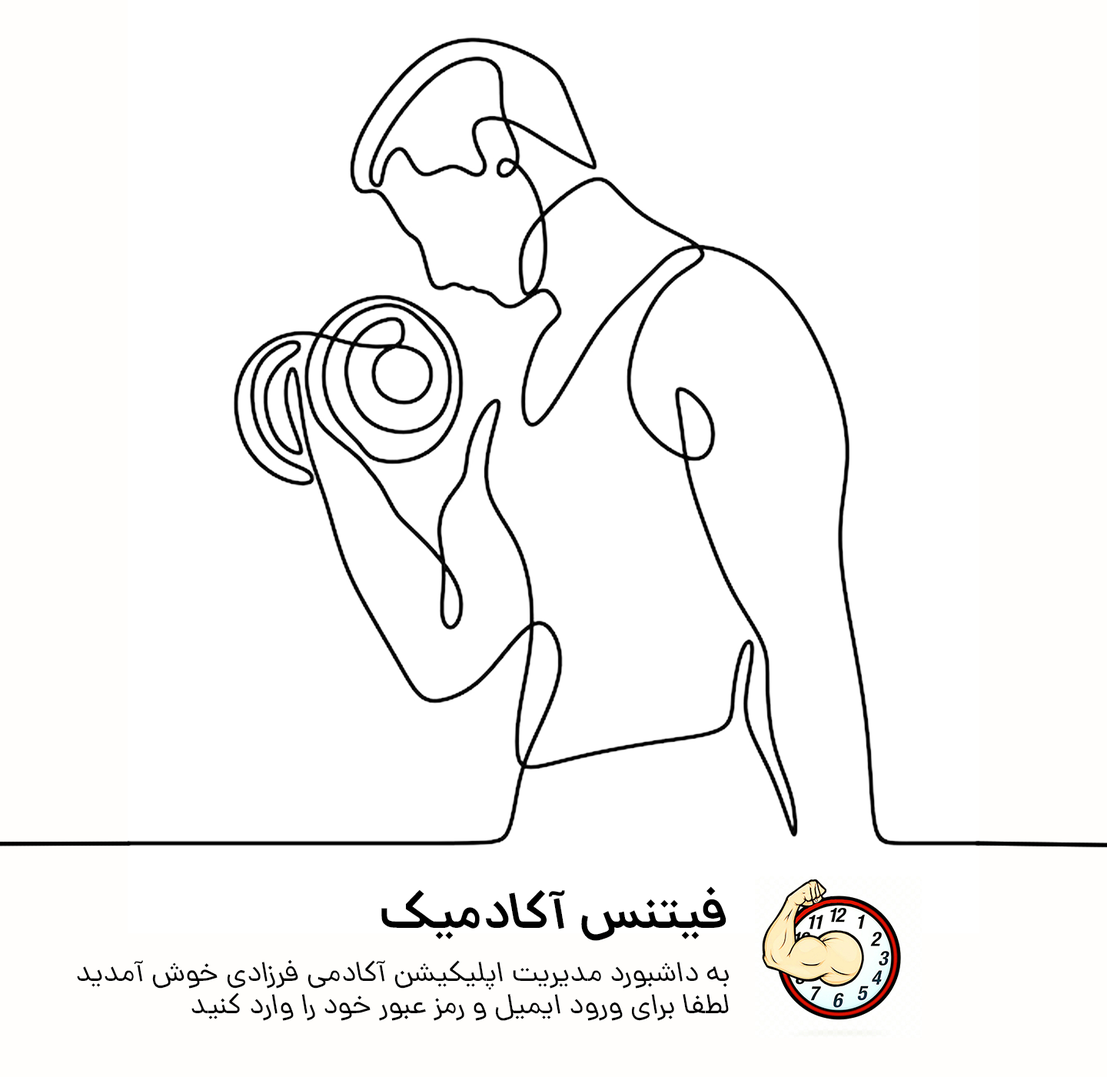
<style>
.page{position:relative;width:1107px;height:1077px;background:#ffffff}
.page>*{position:absolute;margin:0}
.t1{font:51.2px "Dana-DemiBoldItalic";color:#000000;text-transform:uppercase}
.t2{font:28.8px/32px "Dana-RegularItalic";color:#000000;text-transform:uppercase}
</style>
<div class="page">
<p class="t1" style="left:381px;top:886px;width:346px;height:55px">فیتنس آکادمیک</p>
<p class="t2" style="left:77px;top:959px;width:652px;height:62px">به داشبورد مدیریت اپلیکیشن آکادمی فرزادی خوش آمدید<br>لطفا برای ورود ایمیل و رمز عبور خود را وارد کنید</p>
</div>
